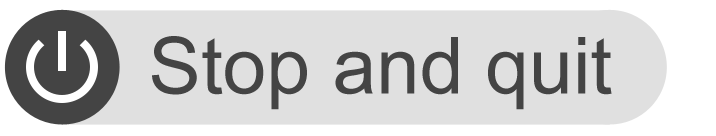
<style>
.page{position:relative;width:716px;height:136px;background:#e0e0e0}
.page>*{position:absolute;margin:0}
.t1{font:78.7px "ArialMT";color:#444444}
</style>
<div class="page">
<p class="t1" style="left:152px;top:36px;width:460px;height:74px">Stop and quit</p>
</div>
